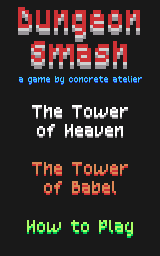
<style>
.page{position:relative;width:160px;height:256px;background:#191919}
.page>*{position:absolute;margin:0}
.t1{font:28px "MagicForest"}
.t2{font:28px "MagicForest";color:#ce3135}
.t3{font:8px "MagicForest"}
.t4{font:8px "MagicForest";color:#44ccff}
.t5{font:16px "MagicForest"}
.t6{font:16px "MagicForest";color:#ffffff}
.t7{font:16px "MagicForest";color:#dd8855}
.t8{font:16px "MagicForest";color:#aaff66}
</style>
<div class="page">
<p class="t1" style="left:18px;top:14px;width:122px;height:55px;text-align:center">Dungeon Smash</p>
<p class="t1" style="left:18px;top:10px;width:122px;height:55px;text-align:center">Dungeon Smash</p>
<p class="t2" style="left:18px;top:7px;width:122px;height:55px;text-align:center">Dungeon Smash</p>
<p class="t3" style="left:19px;top:77px;width:123px;height:8px">a game by concrete atelier</p>
<p class="t4" style="left:19px;top:76px;width:123px;height:8px">a game by concrete atelier</p>
<p class="t5" style="left:27px;top:107px;width:106px;height:131px;text-align:center">The Tower<br>of Heaven<br><br>The Tower<br>of Babel<br><br>How to Play</p>
<p class="t6" style="left:27px;top:105px;width:106px;height:131px;text-align:center">The Tower<br>of Heaven<br><br><span class="t7">The Tower<br>of Babel<br><br></span><span class="t8">How to Play</span></p>
</div>
